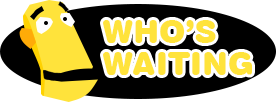
<style>
.page{position:relative;width:276px;height:102px;background:#000000}
.page>*{position:absolute;margin:0}
.t1{font:32px/32px "Swiss721BT-BlackRounded";color:#ffe33b}
</style>
<div class="page">
<p class="t1" style="left:103px;top:20px;width:149px;height:55px">WHO’S <br>WAITING</p>
</div>
